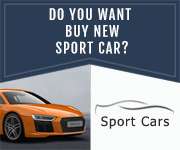
<style>
.page{position:relative;width:180px;height:150px;background:#2b3c55}
.page>*{position:absolute;margin:0}
.t1{font:14px "FjallaOne-Regular";letter-spacing:0.075em;color:#ffffff}
.t2{font:13px "Tahoma";letter-spacing:0.075em;color:#2e2d2c}
</style>
<div class="page">
<p class="t1" style="left:49px;top:8px;width:82px;height:46px;text-align:center">DO YOU WANT<br> BUY NEW<br> SPORT CAR?</p>
<p class="t2" style="left:101px;top:116px;width:68px;height:13px">Sport Cars</p>
</div>
